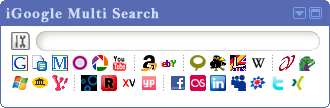
<style>
.page{position:relative;width:330px;height:108px;background:#ffffff}
.page>*{position:absolute;margin:0}
.t1{font:15px "BellMTBold";letter-spacing:0.05em;color:#ceddfc;font-weight:bold;scale:0.93 1}
</style>
<div class="page">
<p class="t1" style="left:6px;top:8px;width:153px;height:15px">iGoogle Multi Search</p>
</div>
